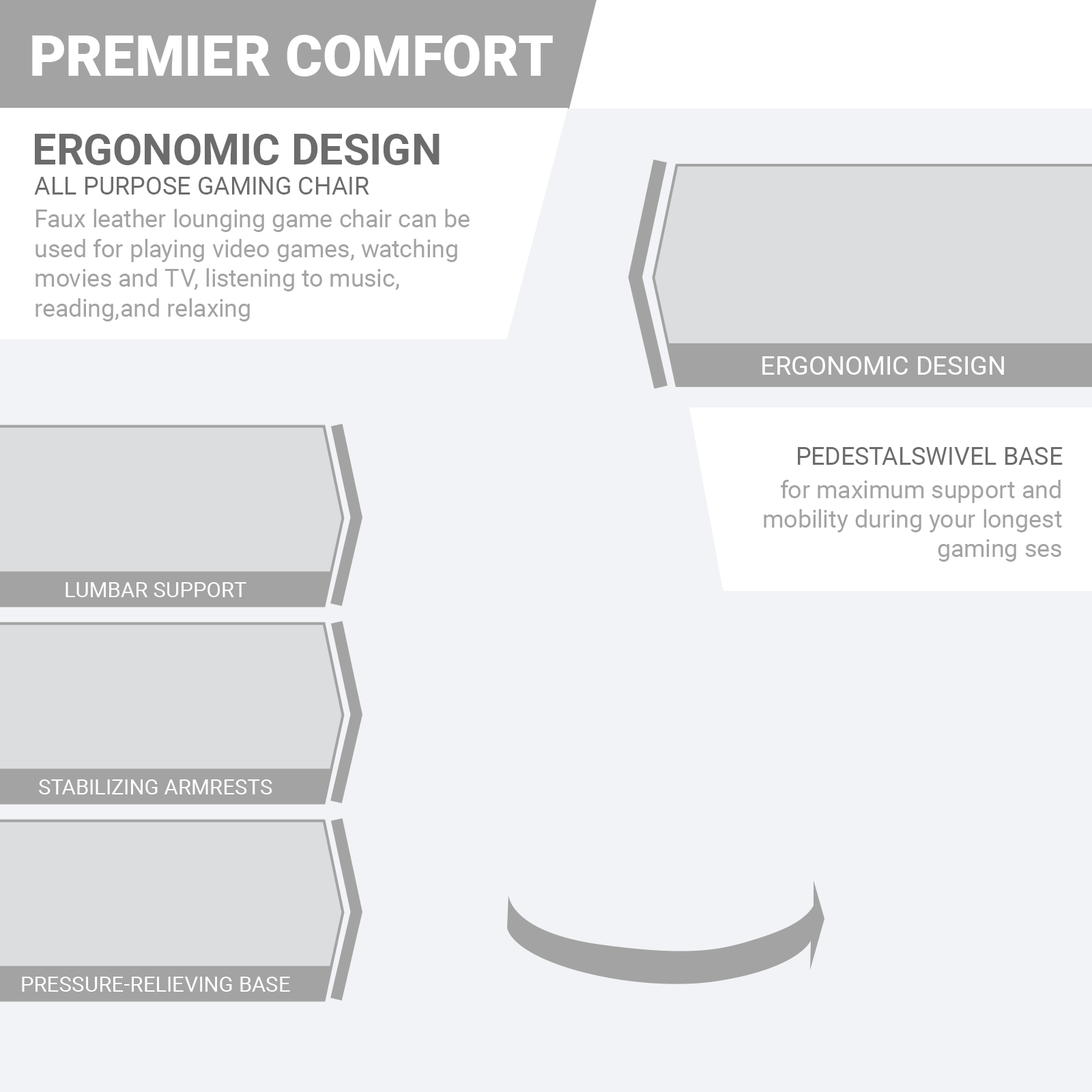
<style>
.page{position:relative;width:1092px;height:1092px;background:#f2f3f6}
.page>*{position:absolute;margin:0}
.t1{font:56.9px "Roboto-Black";color:#ffffff}
.t2{font:43.1px "Roboto-Bold";color:#6c6c6c}
.t3{font:24.7px "Roboto-Regular";color:#6c6c6c}
.t4{font:24.7px "Roboto-Regular";color:#a3a3a3}
.t5{font:26.2px "Roboto-Regular";color:#ffffff}
.t6{font:24.6px "Roboto-Regular";color:#6c6c6c}
.t7{font:24.6px "Roboto-Regular";color:#a3a3a3}
.t8{font:21.3px "Roboto-Regular";color:#ffffff}
</style>
<div class="page">
<p class="t1" style="left:32px;top:35px;width:521px;height:41px">PREMIER COMFORT</p>
<p class="t2" style="left:35px;top:134px;width:405px;height:31px">ERGONOMIC DESIGN</p>
<p class="t3" style="left:34px;top:177px;width:335px;height:18px">ALL PURPOSE GAMING CHAIR</p>
<p class="t4" style="left:35px;top:209px;width:435px;height:112px">Faux leather lounging game chair can be used for playing video games, watching movies and TV, listening to music, reading,and relaxing</p>
<p class="t5" style="left:762px;top:356px;width:242px;height:19px">ERGONOMIC DESIGN</p>
<p class="t6" style="left:798px;top:447px;width:265px;height:18px">PEDESTALSWIVEL BASE</p>
<p class="t7" style="left:764px;top:480px;width:298px;height:82px;text-align:right">for maximum support and mobility during your longest gaming ses</p>
<p class="t8" style="left:66px;top:582px;width:180px;height:15px">LUMBAR SUPPORT</p>
<p class="t8" style="left:39px;top:779px;width:233px;height:15px">STABILIZING ARMRESTS</p>
<p class="t8" style="left:22px;top:977px;width:268px;height:15px">PRESSURE-RELIEVING BASE</p>
</div>
